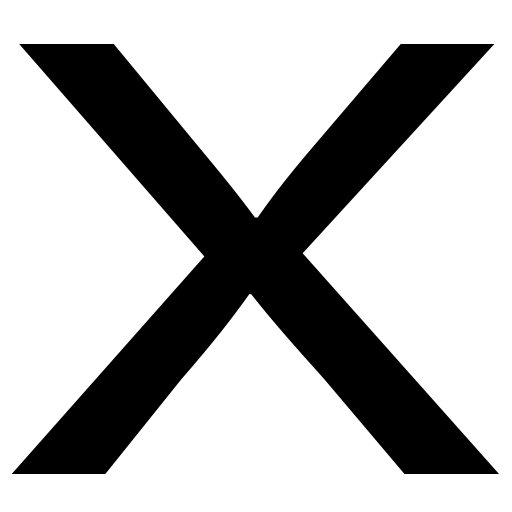
<style>
.page{position:relative;width:512px;height:512px;background:#ffffff}
.page>*{position:absolute;margin:0}
.t1{font:638.5px "MyriadPro-Regular";color:#000000;scale:1.46 1}
</style>
<div class="page">
<p class="t1" style="left:11px;top:44px;width:488px;height:430px">X</p>
</div>
